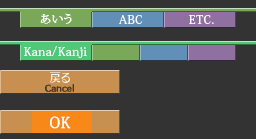
<style>
.page{position:relative;width:256px;height:139px;background:#333333}
.page>*{position:absolute;margin:0}
.t1{font:10.8px "KozMinPro-Medium";letter-spacing:0.025em;color:#ffffff;scale:1.11 1}
.t2{font:12px "KozMinPro-Medium";letter-spacing:0.025em;color:#ffffff}
.t3{font:15px "KozMinPro-Medium";letter-spacing:0.025em;color:#ffffff}
</style>
<div class="page">
<p class="t1" style="left:40px;top:13px;width:32px;height:11px">あいう</p>
<p class="t2" style="left:119px;top:15px;width:23px;height:9px">ABC</p>
<p class="t2" style="left:189px;top:15px;width:25px;height:9px">ETC.</p>
<p class="t2" style="left:24px;top:46px;width:63px;height:12px">Kana/Kan<span class="t1">j</span>i</p>
<p class="t3" style="left:50px;top:116px;width:21px;height:13px">OK</p>
</div>
